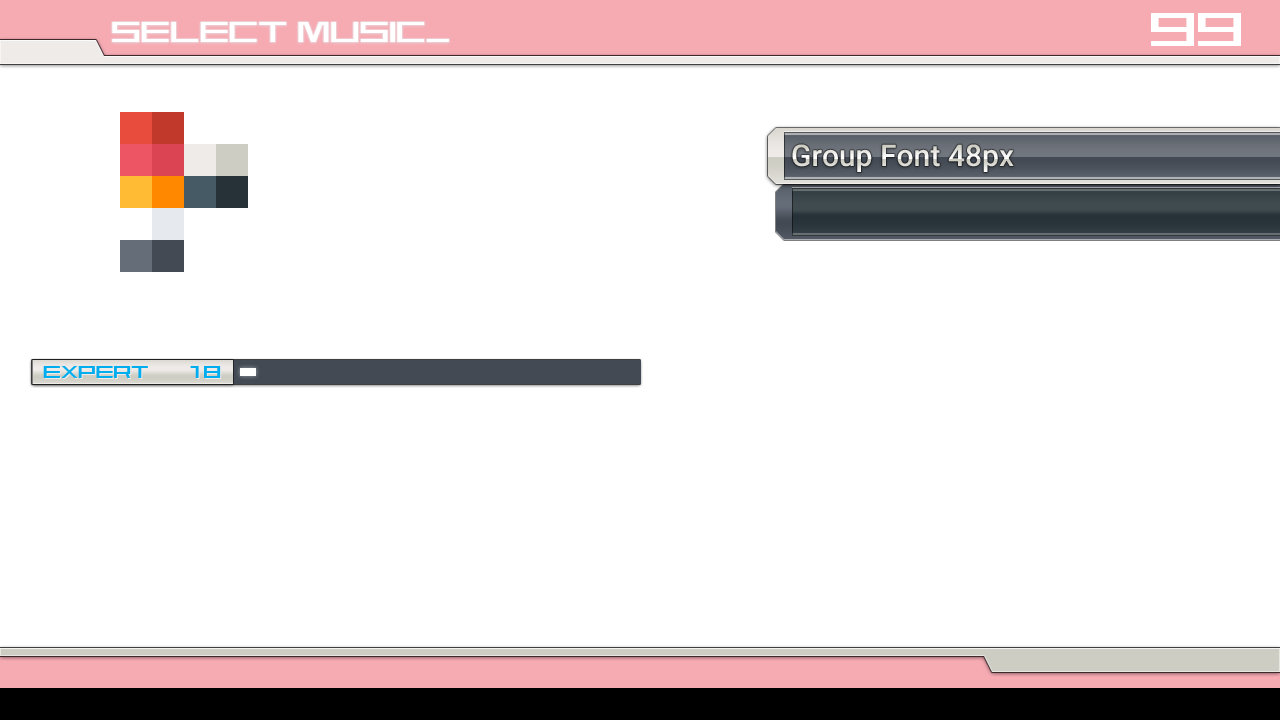
<style>
.page{position:relative;width:1280px;height:720px;background:#ffffff}
.page>*{position:absolute;margin:0}
.t1{font:48px "AstraAfsb07MediumT";color:#ffffff}
.t2{font:30px "AstraAfsb07MediumT";color:#ffffff}
.t3{font:30px "Roboto-Medium"}
.t4{font:18px "AstraAfsb07MediumT";color:#00adef}
</style>
<div class="page">
<p class="t1" style="left:1151px;top:13px;width:90px;height:33px">99</p>
<p class="t2" style="left:112px;top:22px;width:337px;height:20px">SELECT MUSIC_</p>
<p class="t3" style="left:792px;top:144px;width:222px;height:28px">Group Font 48px</p>
<p class="t4" style="left:43px;top:366px;width:105px;height:12px">EXPERT</p>
<p class="t4" style="left:190px;top:366px;width:31px;height:12px">18</p>
</div>
